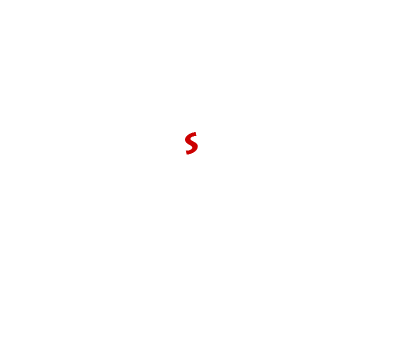
<style>
.page{position:relative;width:410px;height:343px;background:#ffffff}
.page>*{position:absolute;margin:0}
.t1{font:30px "VNI-Lithos";color:#cc0000}
</style>
<div class="page">
<p class="t1" style="left:185px;top:132px;width:13px;height:23px">S</p>
</div>
